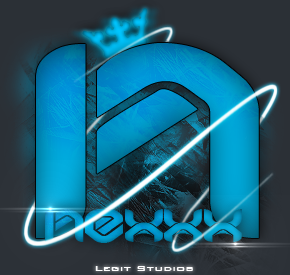
<style>
.page{position:relative;width:290px;height:275px}
.page>*{position:absolute;margin:0}
.t1{font:297.5px "HYPDBDBardustRemix";scale:1.27 1}
.t2{font:51px "HYPDBDBardustRemix";scale:1.27 1}
.t3{font:10.2px "BankGothicBT-Medium";color:#ffffff;scale:1.27 1}
</style>
<div class="page">
<p class="t1" style="left:36px;top:43px;width:223px;height:195px">N</p>
<p class="t2" style="left:45px;top:209px;width:197px;height:34px">NexXx</p>
<p class="t3" style="left:95px;top:266px;width:98px;height:5px">Legit Studios</p>
</div>
